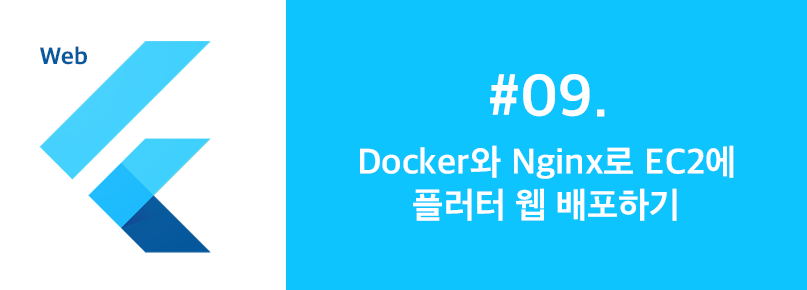
<style>
.page{position:relative;width:807px;height:290px;background:#0dc4ff}
.page>*{position:absolute;margin:0}
.t1{font:24px "AppleSDGothicNeoEB00";color:#08599d}
.t2{font:60px "AppleSDGothicNeoB00";color:#ffffff}
.t3{font:36px "AppleSDGothicNeoB00";color:#ffffff}
</style>
<div class="page">
<p class="t1" style="left:40px;top:46px;width:47px;height:19px">Web</p>
<p class="t2" style="left:490px;top:74px;width:115px;height:43px">#09.</p>
<p class="t3" style="left:360px;top:145px;width:374px;height:76px;text-align:center">Docker와 Nginx로 EC2에<br>플러터 웹 배포하기</p>
</div>
